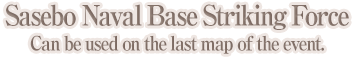
<style>
.page{position:relative;width:354px;height:58px;background:#ffffff}
.page>*{position:absolute;margin:0}
.t1{font:20px/32px "RyuminPro-ExBold";letter-spacing:-0.08em;color:#83726a;scale:0.9 1}
.t2{font:28px/32px "RyuminPro-ExBold";letter-spacing:-0.08em;color:#83726a;scale:0.9 1}
</style>
<div class="page">
<p class="t1" style="left:5px;top:4px;width:344px;height:50px;text-align:center"><span class="t2">Sasebo Naval Base Striking Force<br></span>Can be used on the last map of the event.</p>
</div>
